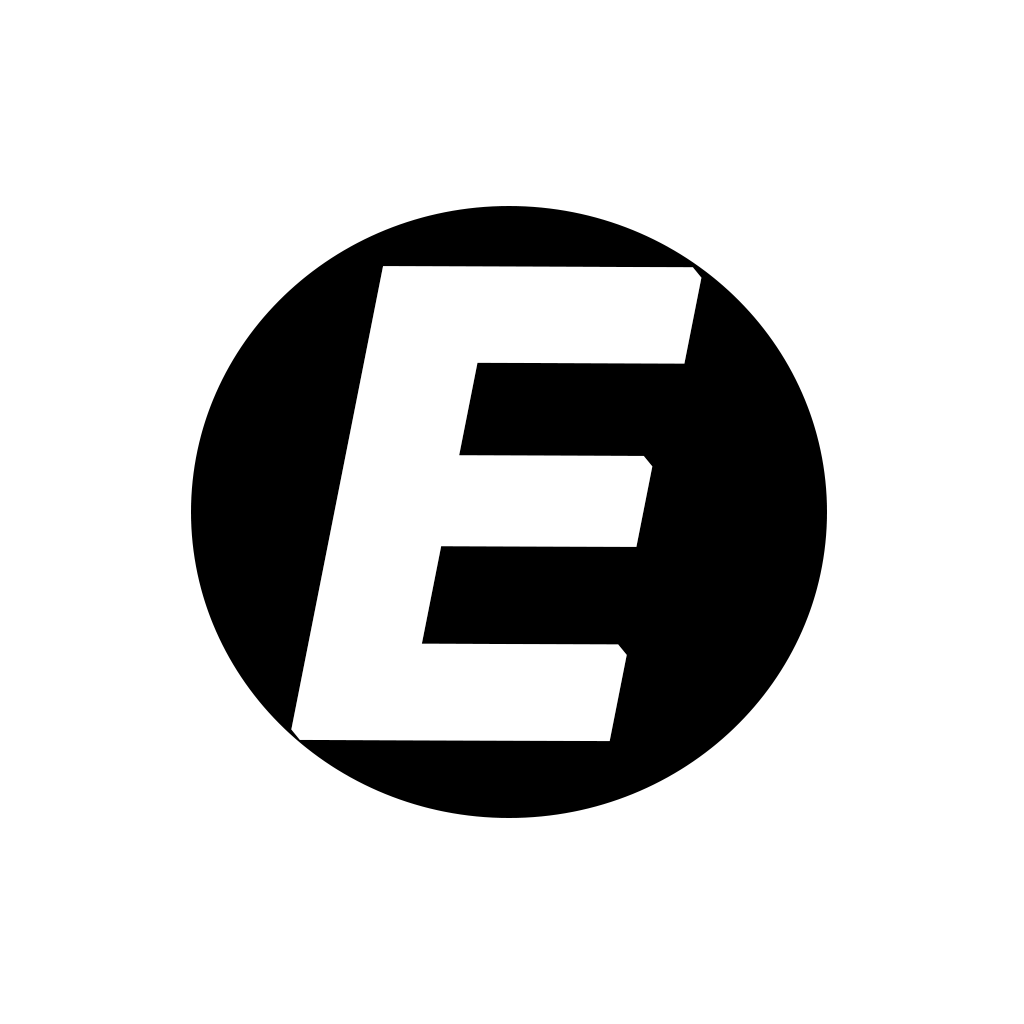
<style>
.page{position:relative;width:1024px;height:1024px;background:#ffffff}
.page>*{position:absolute;margin:0}
.t1{font:648px "SFProDisplay-Bold";letter-spacing:0.005em;color:#ffffff;font-weight:bold;font-style:italic}
</style>
<div class="page">
<p class="t1" style="left:291px;top:266px;width:411px;height:476px">E</p>
</div>
